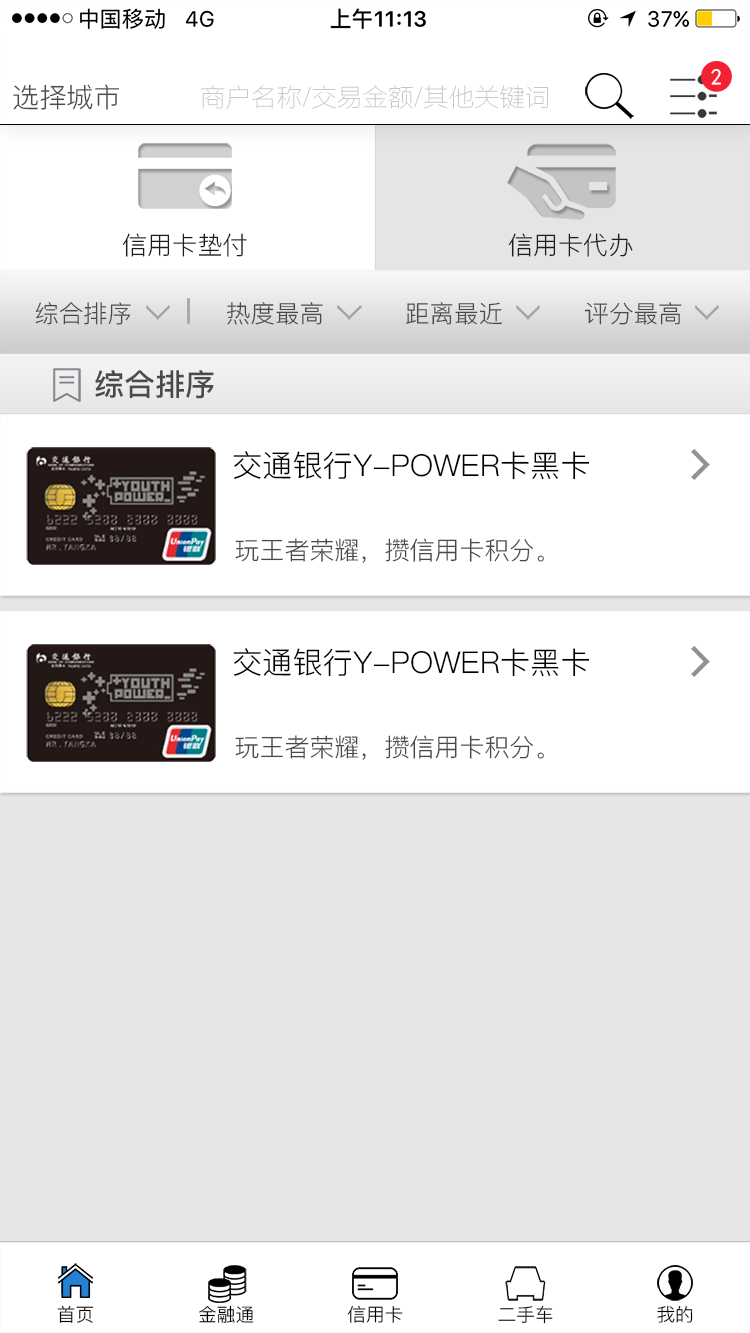
<style>
.page{position:relative;width:750px;height:1333px;background:#ffffff}
.page>*{position:absolute;margin:0}
.t1{font:22.8px "SimHei";color:#ffffff}
.t2{font:27.2px "PingFang-SC-Regular";color:#4c4c4c}
.t3{font:25.5px "FZLTCXHJW--GB1-0";color:#c7c7c7}
.t4{font:25px "PingFang-SC-Regular";color:#1d1d1d}
.t5{font:24.1px "PingFang-SC-Regular";color:#4a4a4a}
.t6{font:30.2px "PingFang-SC-Bold";color:#4a4a4a}
.t7{font:30.2px "PingFang-SC-Regular";color:#000000}
.t8{font:25px "PingFang-SC-Regular";color:#4a4a4a}
.t9{font:18.4px "PingFang-SC-Regular";color:#000000}
</style>
<div class="page">
<p class="t1" style="left:711px;top:68px;width:10px;height:17px">2</p>
<p class="t2" style="left:13px;top:84px;width:106px;height:26px">选择城市</p>
<p class="t3" style="left:201px;top:85px;width:347px;height:24px">商户名称/交易金额/其他关键词</p>
<p class="t4" style="left:122px;top:233px;width:125px;height:24px">信用卡垫付</p>
<p class="t4" style="left:508px;top:233px;width:125px;height:24px">信用卡代办</p>
<p class="t5" style="left:35px;top:302px;width:96px;height:23px">综合排序</p>
<p class="t5" style="left:227px;top:302px;width:96px;height:23px">热度最高</p>
<p class="t5" style="left:406px;top:302px;width:96px;height:23px">距离最近</p>
<p class="t5" style="left:584px;top:302px;width:98px;height:23px">评分最高</p>
<p class="t6" style="left:95px;top:370px;width:119px;height:29px">综合排序</p>
<p class="t7" style="left:233px;top:451px;width:357px;height:29px">交通银行Y-POWER卡黑卡</p>
<p class="t8" style="left:235px;top:538px;width:309px;height:25px">玩王者荣耀，攒信用卡积分。</p>
<p class="t7" style="left:233px;top:648px;width:357px;height:29px">交通银行Y-POWER卡黑卡</p>
<p class="t8" style="left:235px;top:735px;width:309px;height:25px">玩王者荣耀，攒信用卡积分。</p>
<p class="t9" style="left:57px;top:1305px;width:37px;height:18px">首页</p>
<p class="t9" style="left:199px;top:1305px;width:55px;height:18px">金融通</p>
<p class="t9" style="left:347px;top:1305px;width:56px;height:18px">信用卡</p>
<p class="t9" style="left:498px;top:1305px;width:55px;height:19px">二手车</p>
<p class="t9" style="left:657px;top:1305px;width:36px;height:18px">我的</p>
</div>
